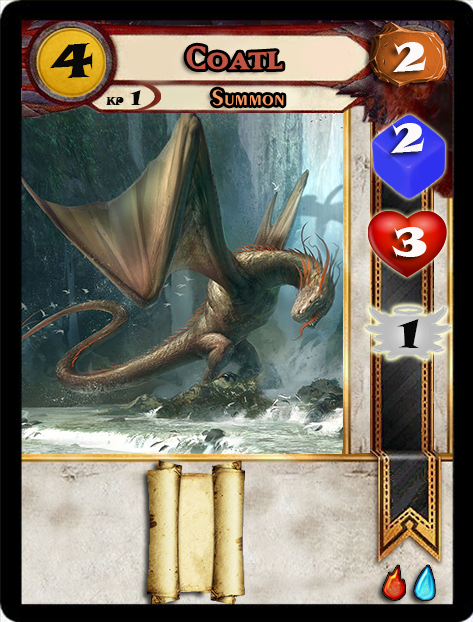
<style>
.page{position:relative;width:473px;height:622px}
.page>*{position:absolute;margin:0}
.t1{font:46.6px "SnapITC-Regular";color:#090909;scale:1.05 1}
.t2{font:40px "MatrixBoldSmallCaps";color:#c25443;scale:1.06 1}
.t3{font:40px "SnapITC-Regular";color:#fef9f9;scale:1.05 1}
.t4{font:22.7px "Exotic350BT-DemiBold";color:#f89c64;scale:1.06 1}
.t5{font:20.5px "SnapITC-Regular";color:#090909}
.t6{font:40px "SnapITC-Regular";color:#090909;scale:1.05 1}
</style>
<div class="page">
<p class="t1" style="left:50px;top:43px;width:43px;height:35px">4</p>
<p class="t2" style="left:186px;top:45px;width:97px;height:25px">Coatl</p>
<p class="t3" style="left:393px;top:42px;width:34px;height:30px">2</p>
<p class="t4" style="left:212px;top:89px;width:72px;height:17px">Summon</p>
<p class="t5" style="left:130px;top:90px;width:11px;height:15px">1</p>
<p class="t3" style="left:391px;top:123px;width:34px;height:30px">2</p>
<p class="t3" style="left:392px;top:227px;width:35px;height:30px">3</p>
<p class="t6" style="left:397px;top:319px;width:22px;height:29px">1</p>
</div>
